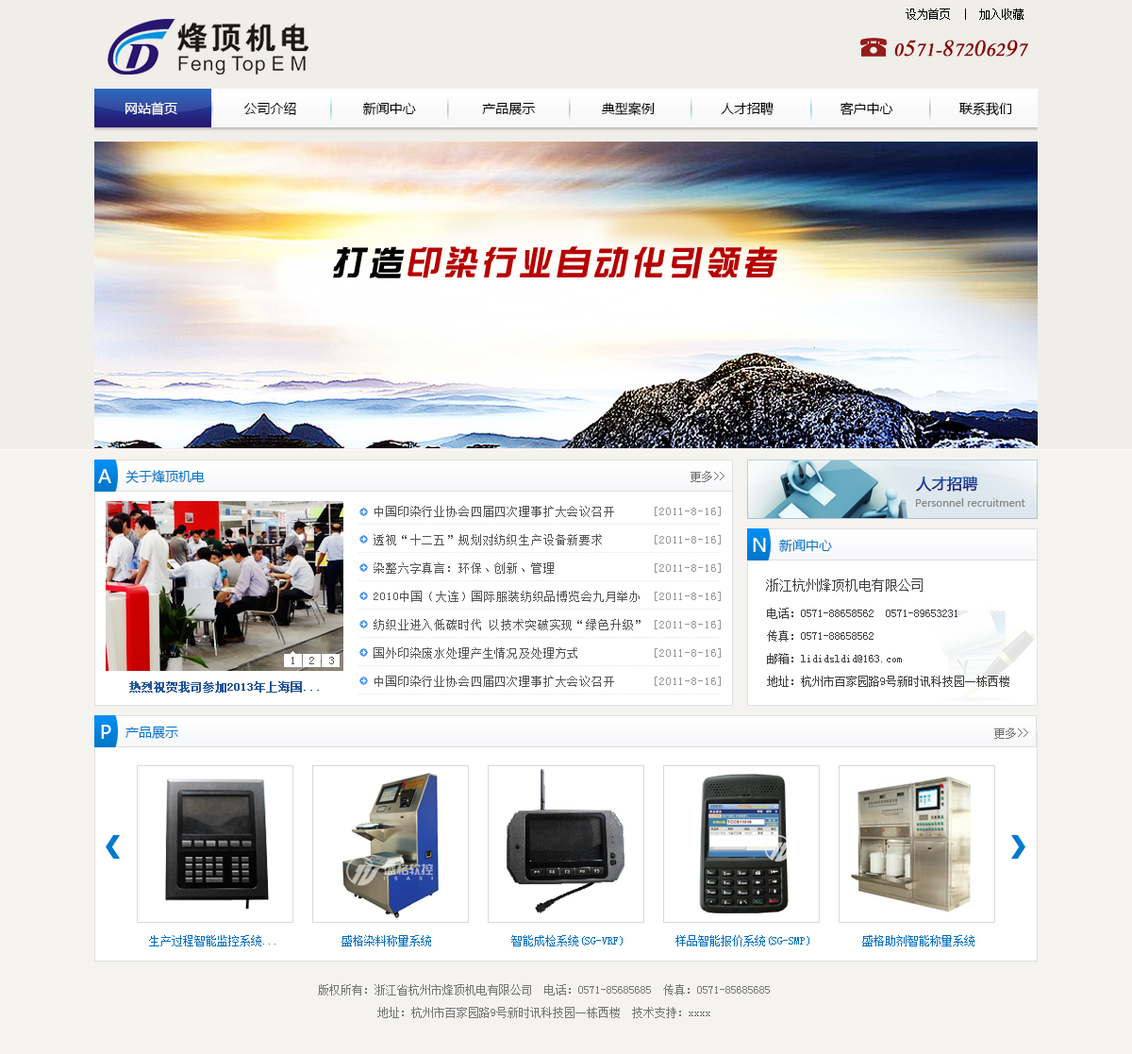
<style>
.page{position:relative;width:1132px;height:1054px}
.page>*{position:absolute;margin:0}
.t1{font:11.3px "SimSun";color:#000000}
.t2{font:22.6px "Aparajita";color:#8c0000;font-weight:bold;font-style:italic}
.t3{font:28.3px "Aparajita";color:#8c0000;font-weight:bold;font-style:italic}
.t4{font:13.2px "MicrosoftYaHei";color:#000000}
.t5{font:13.2px "MicrosoftYaHei";color:#ffffff}
.t6{font:34px "DFZongYi-Bd-80-Win-GB";letter-spacing:0.1em;color:#b60101;font-style:italic}
.t7{font:34px "DFZongYi-Bd-80-Win-GB";letter-spacing:0.1em;color:#000000;font-style:italic}
.t8{font:18.9px "MicrosoftYaHei";color:#ffffff}
.t9{font:13.2px "MicrosoftYaHei";color:#0077ca}
.t10{font:11.3px "SimSun";color:#6e6e6e}
.t11{font:15.1px "MicrosoftYaHei";font-weight:bold}
.t12{font:11.3px/28.3px "SimSun";letter-spacing:0.07em;color:#545454}
.t13{font:11.3px/28.3px "SimSun";letter-spacing:0.07em;color:#959494}
.t14{font:10.4px "MicrosoftYaHei";color:#878787}
.t15{font:13.2px "SimSun";color:#3f3f3f}
.t16{font:11.3px/22.6px "SimSun";color:#3f3f3f}
.t17{font:11.3px "SimSun";letter-spacing:0.07em;color:#545454}
.t18{font:11.3px "SimSun";color:#225599;font-weight:bold}
.t19{font:11.3px "SimSun";color:#006fbd}
.t20{font:11.3px/22.6px "SimSun";color:#777777}
</style>
<div class="page">
<p class="t1" style="left:905px;top:8px;width:118px;height:12px">设为首页  |  加入收藏</p>
<p class="t2" style="left:894px;top:40px;width:134px;height:17px">0<span class="t3">5</span>71-<span class="t3">8</span>72<span class="t3">0</span>62<span class="t3">9</span>7</p>
<p class="t4" style="left:125px;top:102px;width:887px;height:14px"><span class="t5">网站首页</span>                 公司介绍                 新闻中心                 产品展示                 典型案例                 人才招聘                 客户中心                 联系我们</p>
<p class="t6" style="left:333px;top:246px;width:444px;height:32px"><span class="t7">打造</span>印染行业自动化引领者</p>
<p class="t8" style="left:98px;top:469px;width:13px;height:14px">A</p>
<p class="t9" style="left:125px;top:470px;width:80px;height:13px">关于烽顶机电</p>
<p class="t10" style="left:690px;top:471px;width:34px;height:11px">更多&gt;&gt;</p>
<p class="t11" style="left:916px;top:475px;width:62px;height:16px">人才招聘</p>
<p class="t12" style="left:374px;top:506px;width:266px;height:181px">中国印染行业协会四届四次理事扩大会议召开      <br>透视“十二五”规划对纺织生产设备新要求<br>染整六字真言：环保、创新、管理 <br>2010中国（大连）国际服装纺织品博览会九月举办<br>纺织业进入低碳时代 以技术突破实现“绿色升级”<br>国外印染废水处理产生情况及处理方式<br>中国印染行业协会四届四次理事扩大会议召开</p>
<p class="t13" style="left:655px;top:506px;width:66px;height:180px">[2011-8-16]<br>[2011-8-16]<br>[2011-8-16]<br>[2011-8-16]<br>[2011-8-16]<br>[2011-8-16]<br>[2011-8-16]</p>
<p class="t14" style="left:916px;top:498px;width:109px;height:8px">Personnel recruitment</p>
<p class="t8" style="left:753px;top:538px;width:13px;height:14px">N</p>
<p class="t9" style="left:779px;top:539px;width:53px;height:13px">新闻中心</p>
<p class="t15" style="left:766px;top:578px;width:156px;height:13px">浙江杭州烽顶机电有限公司</p>
<p class="t16" style="left:767px;top:607px;width:242px;height:80px">电话：0571-88658562  0571-89653231<br>传真：0571-88658562<br>邮箱：lididsldid@163.com<br>地址：杭州市百家园路9号新时讯科技园一栋西楼</p>
<p class="t17" style="left:291px;top:656px;width:43px;height:8px">1  2  3</p>
<p class="t18" style="left:129px;top:681px;width:190px;height:11px">热烈祝贺我司参加2013年上海国...</p>
<p class="t8" style="left:101px;top:724px;width:10px;height:15px">P</p>
<p class="t9" style="left:125px;top:725px;width:53px;height:14px">产品展示</p>
<p class="t10" style="left:994px;top:727px;width:34px;height:12px">更多&gt;&gt;</p>
<p class="t19" style="left:149px;top:935px;width:825px;height:11px">生产过程智能监控系统...           盛格染料称量系统              智能成检系统(SG-VRF)         样品智能报价系统(SG-SMP)         盛格助剂智能称量系统</p>
<p class="t20" style="left:318px;top:984px;width:452px;height:34px;text-align:center">版权所有：浙江省杭州市烽顶机电有限公司  电话：0571-85685685　传真：0571-85685685<br>地址：杭州市百家园路9号新时讯科技园一栋西楼　技术支持：xxxx</p>
</div>
